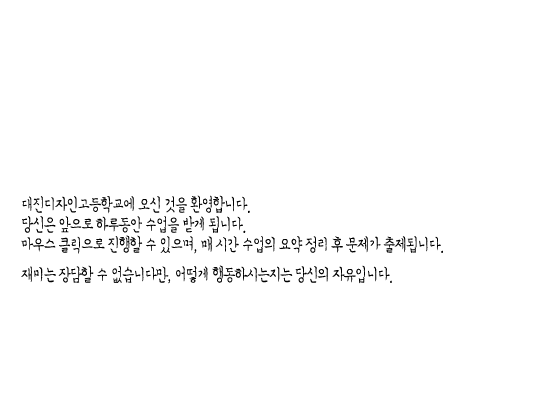
<style>
.page{position:relative;width:550px;height:400px;background:#ffffff}
.page>*{position:absolute;margin:0}
.t1{font:18px "SanGw";letter-spacing:-0.05em;color:#000000;scale:0.8 1}
</style>
<div class="page">
<p class="t1" style="left:22px;top:195px;width:228px;height:19px">대진디자인고등학교에 오신 것을 환영합니다.</p>
<p class="t1" style="left:22px;top:216px;width:224px;height:17px">당신은 앞으로 하루동안 수업을 받게 됩니다.</p>
<p class="t1" style="left:21px;top:235px;width:422px;height:19px">마우스 클릭으로 진행할 수 있으며, 매 시간 수업의 요약 정리 후 문제가 출제됩니다.</p>
<p class="t1" style="left:21px;top:265px;width:371px;height:19px">재미는 장담할 수 없습니다만, 어떻게 행동하시는지는 당신의 자유입니다.</p>
</div>
